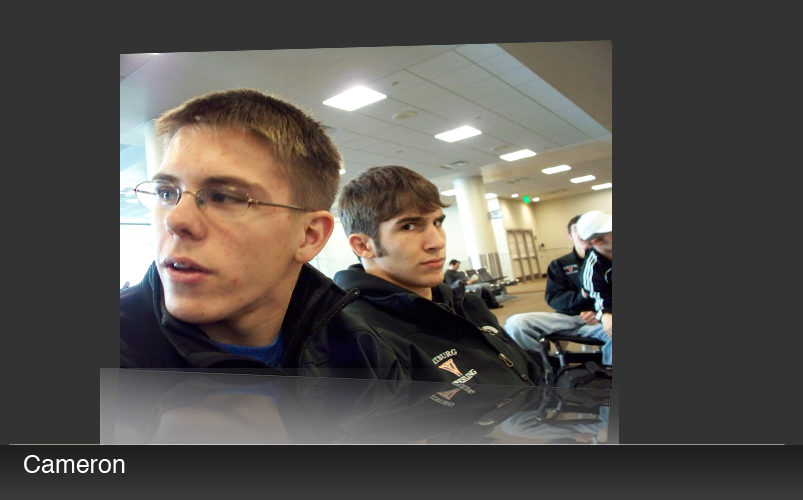
<style>
.page{position:relative;width:803px;height:500px;background:#333333}
.page>*{position:absolute;margin:0}
.t1{font:25px "Helvetica";color:#ffffff}
</style>
<div class="page">
<p class="t1" style="left:24px;top:455px;width:101px;height:18px">Cameron</p>
</div>
